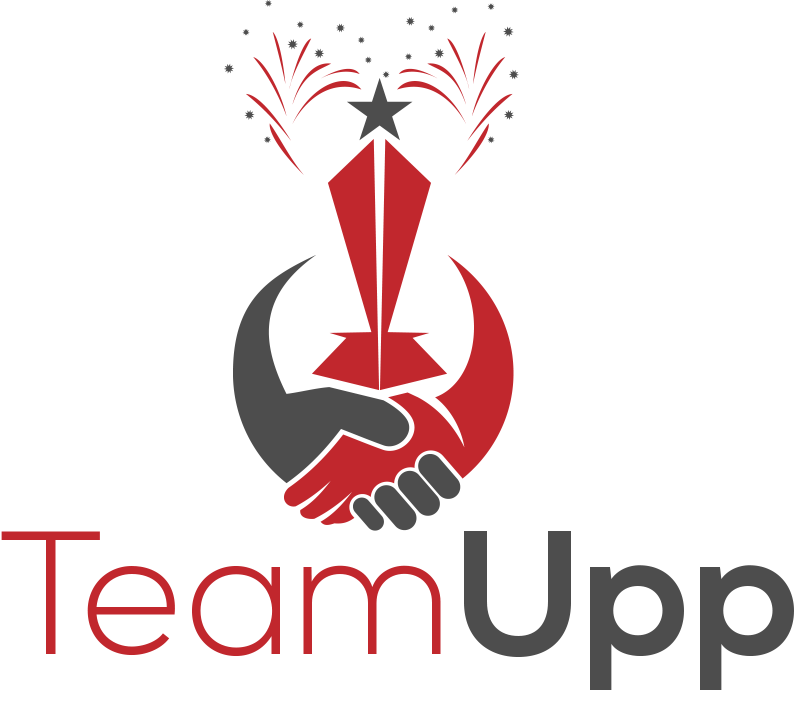
<style>
.page{position:relative;width:803px;height:710px;background:#ffffff}
.page>*{position:absolute;margin:0}
.t1{font:175.4px "NexaLight";color:#c1272d}
.t2{font:175.4px "NexaBold";color:#4d4d4d}
</style>
<div class="page">
<p class="t1" style="left:1px;top:531px;width:793px;height:159px">Team<span class="t2">Upp</span></p>
</div>
